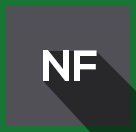
<style>
.page{position:relative;width:136px;height:132px;background:#515057}
.page>*{position:absolute;margin:0}
.t1{font:44px "NexaBold";color:#ffffff}
</style>
<div class="page">
<p class="t1" style="left:43px;top:50px;width:54px;height:31px">NF</p>
</div>
